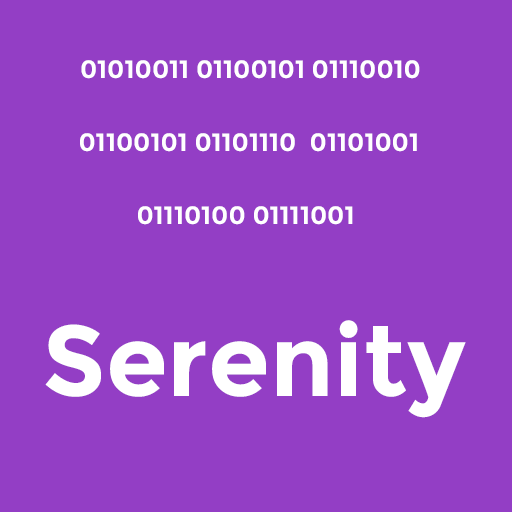
<style>
.page{position:relative;width:512px;height:512px;background:#933ec5}
.page>*{position:absolute;margin:0}
.t1{font:25px "Montserrat-Bold";color:#ffffff}
.t2{font:100px "Montserrat-Bold";color:#ffffff}
</style>
<div class="page">
<p class="t1" style="left:81px;top:60px;width:339px;height:19px">01010011 01100101 01110010</p>
<p class="t1" style="left:80px;top:133px;width:337px;height:19px">01100101 01101110  01101001</p>
<p class="t1" style="left:138px;top:206px;width:215px;height:19px">01110100 01111001</p>
<p class="t2" style="left:45px;top:320px;width:421px;height:98px">Serenity</p>
</div>
